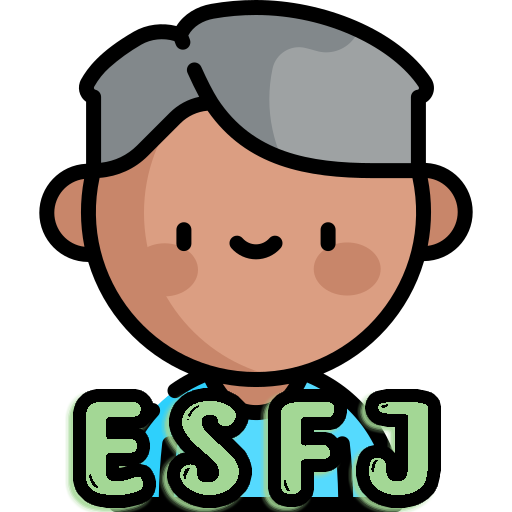
<style>
.page{position:relative;width:512px;height:512px;background:#ffffff}
.page>*{position:absolute;margin:0}
.t1{font:149px "SunnySpells-Regular";letter-spacing:0.2em;color:#a3d795;scale:1.2 1}
</style>
<div class="page">
<p class="t1" style="left:86px;top:401px;width:342px;height:94px">ESFJ</p>
</div>
